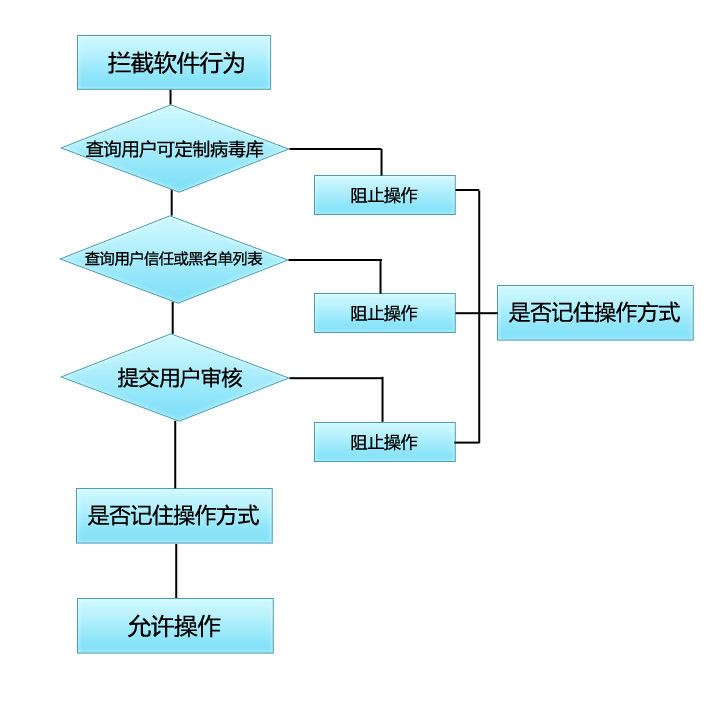
<style>
.page{position:relative;width:710px;height:710px;background:#ffffff}
.page>*{position:absolute;margin:0}
.t1{font:22.9px "MicrosoftYaHei";color:#000000}
.t2{font:17.8px "MicrosoftYaHei";color:#000000}
.t3{font:16.7px "MicrosoftYaHei";color:#000000}
.t4{font:14.8px "MicrosoftYaHei";color:#000000}
.t5{font:21.4px "MicrosoftYaHei";color:#000000}
.t6{font:20.7px "MicrosoftYaHei";color:#000000}
.t7{font:23.2px "MicrosoftYaHei";color:#000000}
</style>
<div class="page">
<p class="t1" style="left:108px;top:51px;width:136px;height:23px">拦截软件行为</p>
<p class="t2" style="left:86px;top:140px;width:178px;height:18px">查询用户可定制病毒库</p>
<p class="t3" style="left:351px;top:187px;width:67px;height:17px">阻止操作</p>
<p class="t4" style="left:85px;top:251px;width:178px;height:15px">查询用户信任或黑名单列表</p>
<p class="t3" style="left:351px;top:305px;width:67px;height:17px">阻止操作</p>
<p class="t5" style="left:509px;top:301px;width:171px;height:22px">是否记住操作方式</p>
<p class="t6" style="left:118px;top:367px;width:125px;height:21px">提交用户审核</p>
<p class="t3" style="left:351px;top:434px;width:67px;height:17px">阻止操作</p>
<p class="t5" style="left:88px;top:504px;width:171px;height:22px">是否记住操作方式</p>
<p class="t7" style="left:128px;top:614px;width:93px;height:24px">允许操作</p>
</div>
